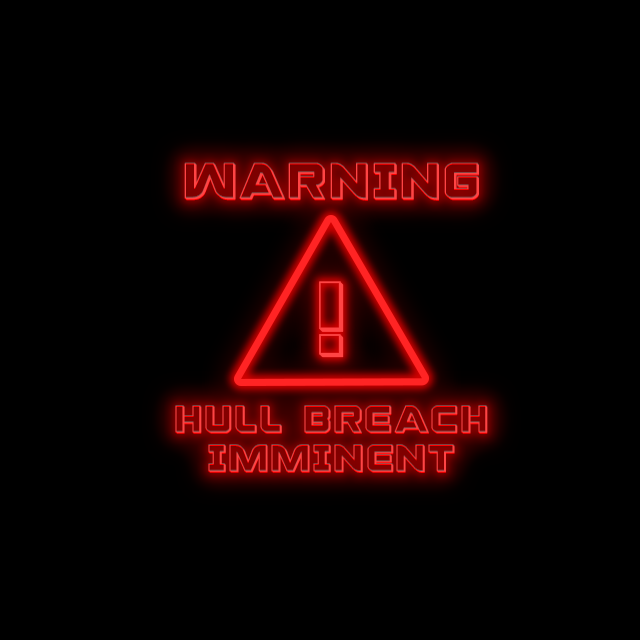
<style>
.page{position:relative;width:640px;height:640px;background:#000000}
.page>*{position:absolute;margin:0}
.t1{font:36px/39px "Praetorian3D";letter-spacing:0.07em;color:#ff4444}
.t2{font:48px/39px "Praetorian3D";letter-spacing:0.07em;color:#ff4444}
.t3{font:36px/39px "Praetorian3D";letter-spacing:0.07em}
.t4{font:48px/39px "Praetorian3D";letter-spacing:0.07em}
.t5{font:100px "Praetorian3D";letter-spacing:0.07em;color:#ff4444}
.t6{font:24px "Praetorian3D";letter-spacing:0.07em;color:#ff4444}
</style>
<div class="page">
<p class="t1" style="left:175px;top:163px;width:313px;height:310px;text-align:center"><span class="t2">WARNING<br><br><br><br><br><br></span>HULL BREACH<br>IMMINENT</p>
<p class="t3" style="left:175px;top:162px;width:313px;height:310px;text-align:center"><span class="t4">WARNING<br><br><br><br><br></span><br>HULL BREACH<br>IMMINENT</p>
<p class="t5" style="left:319px;top:281px;width:25px;height:77px"><span class="t6"><br><br></span>!</p>
<p class="t5" style="left:319px;top:281px;width:25px;height:77px"><span class="t6"><br><br></span>!</p>
</div>
